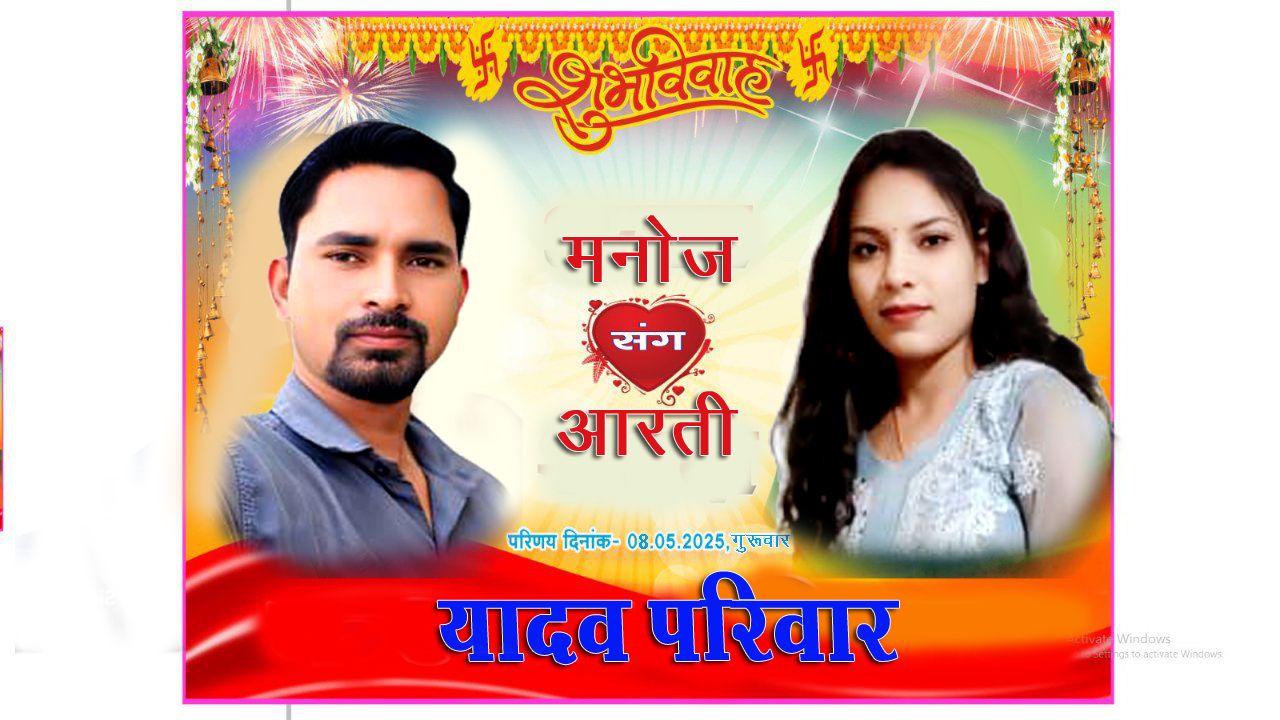
<style>
.page{position:relative;width:1280px;height:720px;background:#ffffff}
.page>*{position:absolute;margin:0}
.t1{font:86.7px "KrutiDev011";color:#dd1118}
.t2{font:20px "Arial-BoldMT";color:#049feb}
.t3{font:24px "KrutiDev011"}
.t4{font:24px "KrutiDev011";color:#049feb}
.t5{font:120px "Kruti-Dev734";color:#041bf5}
</style>
<div class="page">
<p class="t1" style="left:562px;top:215px;width:177px;height:67px">eukst</p>
<p class="t1" style="left:557px;top:391px;width:181px;height:64px">vkjrh</p>
<p class="t2" style="left:639px;top:534px;width:9px;height:15px">8</p>
<p class="t3" style="left:730px;top:534px;width:59px;height:18px">xq:okj</p>
<p class="t4" style="left:731px;top:535px;width:59px;height:18px">xq:okj</p>
<p class="t5" style="left:437px;top:571px;width:462px;height:94px">;kno ifjokj</p>
</div>
